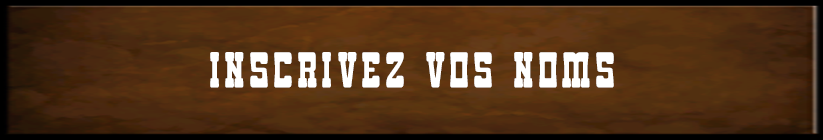
<style>
.page{position:relative;width:823px;height:140px}
.page>*{position:absolute;margin:0}
.t1{font:41px "Goma-Western";letter-spacing:0.1em;color:#ffffff;font-weight:bold}
</style>
<div class="page">
<p class="t1" style="left:210px;top:52px;width:404px;height:36px">INSCRIVEZ VOS NOMS</p>
</div>
